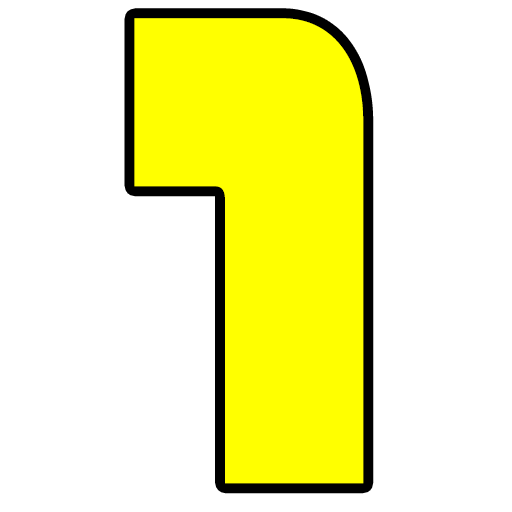
<style>
.page{position:relative;width:512px;height:512px;background:#ffffff}
.page>*{position:absolute;margin:0}
.t1{font:571px "VDL-LogoJrBlack-Black";letter-spacing:0.11em;color:#ffff00;scale:0.77 1}
</style>
<div class="page">
<p class="t1" style="left:134px;top:18px;width:230px;height:466px">1</p>
</div>
